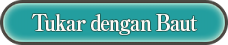
<style>
.page{position:relative;width:228px;height:45px}
.page>*{position:absolute;margin:0}
.t1{font:23px "RyuminPro-ExBold";letter-spacing:-0.08em;color:#ffffff;scale:0.9 1}
</style>
<div class="page">
<p class="t1" style="left:31px;top:14px;width:166px;height:21px">Tukar dengan Baut</p>
</div>
